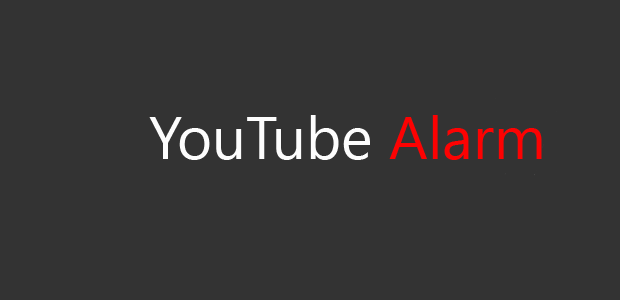
<style>
.page{position:relative;width:620px;height:300px;background:#333333}
.page>*{position:absolute;margin:0}
.t1{font:60px "SegoeUI";color:#fdfdfd}
.t2{font:60px "SegoeUI";color:#fd0202}
</style>
<div class="page">
<p class="t1" style="left:149px;top:115px;width:393px;height:45px">YouTube <span class="t2">Alarm</span></p>
</div>
